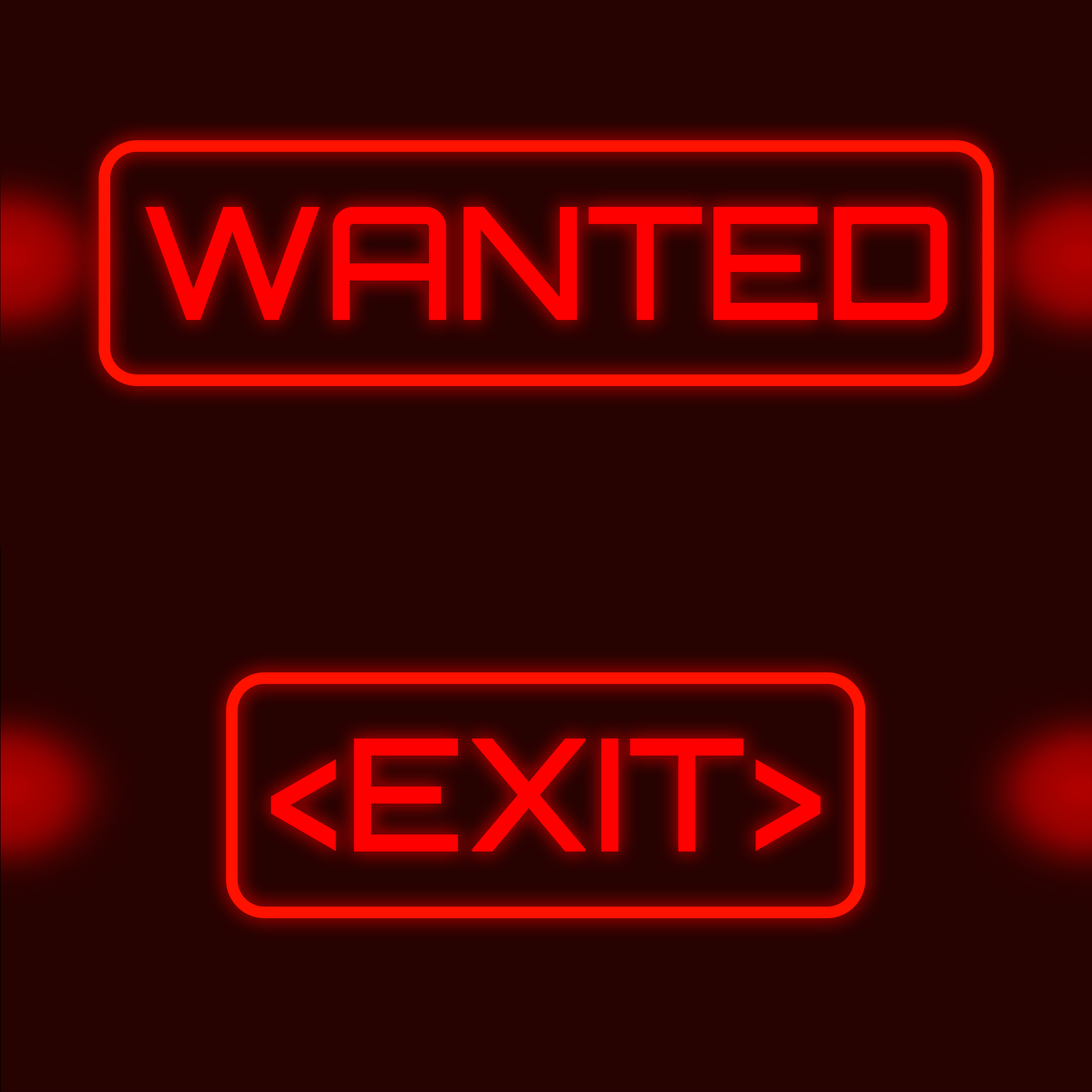
<style>
.page{position:relative;width:1092px;height:1092px;background:#260201}
.page>*{position:absolute;margin:0}
.t1{font:157.1px "Orbitron-Medium";color:#ff0000}
</style>
<div class="page">
<p class="t1" style="left:145px;top:207px;width:802px;height:113px">WANTED</p>
<p class="t1" style="left:271px;top:738px;width:550px;height:114px">&lt;EXIT&gt;</p>
</div>
